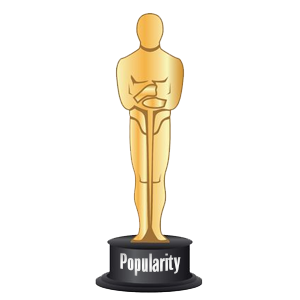
<style>
.page{position:relative;width:300px;height:300px;background:#ffffff}
.page>*{position:absolute;margin:0}
.t1{font:19.9px "Balboa-Condensed";color:#f4f4f4}
</style>
<div class="page">
<p class="t1" style="left:120px;top:253px;width:61px;height:23px">Popularity</p>
</div>
